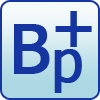
<style>
.page{position:relative;width:100px;height:100px;background:#1535a0}
.page>*{position:absolute;margin:0}
.t1{font:60px "Tahoma";color:#1535a0;font-weight:bold}
.t2{font:68px "Tahoma";color:#1535a0;font-weight:bold}
.t3{font:56px "Tahoma";color:#1535a0;font-weight:bold}
</style>
<div class="page">
<p class="t1" style="left:55px;top:11px;width:37px;height:36px">+</p>
<p class="t2" style="left:14px;top:24px;width:36px;height:50px">B</p>
<p class="t3" style="left:54px;top:49px;width:28px;height:44px">p</p>
</div>
